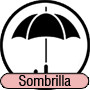
<style>
.page{position:relative;width:90px;height:90px;background:#ffffff}
.page>*{position:absolute;margin:0}
.t1{font:14.7px "Swiss721BT-RomanCondensed";color:#000000}
</style>
<div class="page">
<p class="t1" style="left:19px;top:75px;width:52px;height:11px">Sombrilla</p>
</div>
